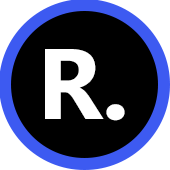
<style>
.page{position:relative;width:170px;height:170px;background:#000000}
.page>*{position:absolute;margin:0}
.t1{font:99.9px "SegoeUI-Bold";color:#ffffff}
</style>
<div class="page">
<p class="t1" style="left:45px;top:49px;width:80px;height:72px">.R</p>
</div>
